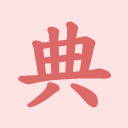
<style>
.page{position:relative;width:128px;height:128px;background:#fde2e2}
.page>*{position:absolute;margin:0}
.t1{font:100px "DFKaiShu-SB-Estd-BF";color:#db6968;font-weight:bold}
</style>
<div class="page">
<p class="t1" style="left:18px;top:21px;width:93px;height:87px">典</p>
</div>
